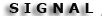
<style>
.page{position:relative;width:102px;height:16px;background:#ffffff}
.page>*{position:absolute;margin:0}
.t1{font:14px "Verdana-Bold";color:#0b0a0a}
</style>
<div class="page">
<p class="t1" style="left:9px;top:3px;width:85px;height:10px">S I G N A L</p>
</div>
